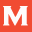
<style>
.page{position:relative;width:32px;height:32px;background:#f14b32}
.page>*{position:absolute;margin:0}
.t1{font:28px "CopperplateGothic-Bold";letter-spacing:0.005em;color:#fefbfb;font-weight:bold}
</style>
<div class="page">
<p class="t1" style="left:3px;top:6px;width:25px;height:20px">M</p>
</div>
